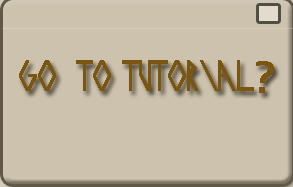
<style>
.page{position:relative;width:293px;height:187px;background:#cdc2ad}
.page>*{position:absolute;margin:0}
.t1{font:36px "exoziti";color:#865f14;font-weight:bold}
.t2{font:30px "exoziti";color:#865f14;font-weight:bold}
.t3{font:48px "Corbel";color:#865f14;font-weight:bold}
</style>
<div class="page">
<p class="t1" style="left:19px;top:60px;width:255px;height:33px"><span class="t2"><br></span>GO TO TUTORIAL<span class="t3">?</span></p>
</div>
